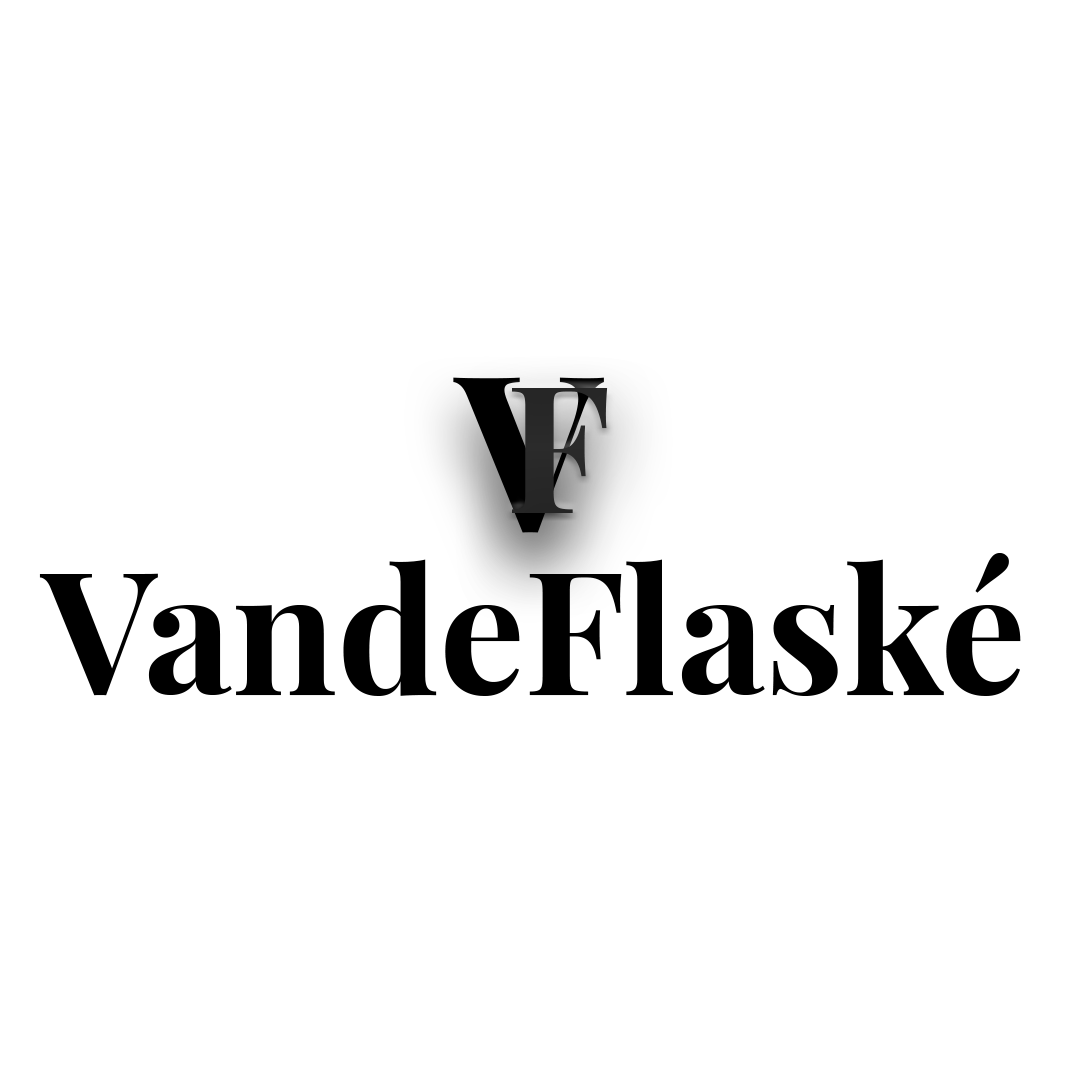
<style>
.page{position:relative;width:1080px;height:1080px;background:#ffffff}
.page>*{position:absolute;margin:0}
.t1{font:218px "PlayfairDisplay-Bold";color:#000000}
.t2{font:177.6px "PlayfairDisplay-Bold";color:#2b2b2b}
.t3{font:170.9px "PlayfairDisplay-Bold";color:#000000}
</style>
<div class="page">
<p class="t1" style="left:453px;top:377px;width:151px;height:156px">V</p>
<p class="t2" style="left:512px;top:388px;width:96px;height:125px">F</p>
<p class="t3" style="left:39px;top:553px;width:982px;height:143px">VandeFlaské</p>
</div>
